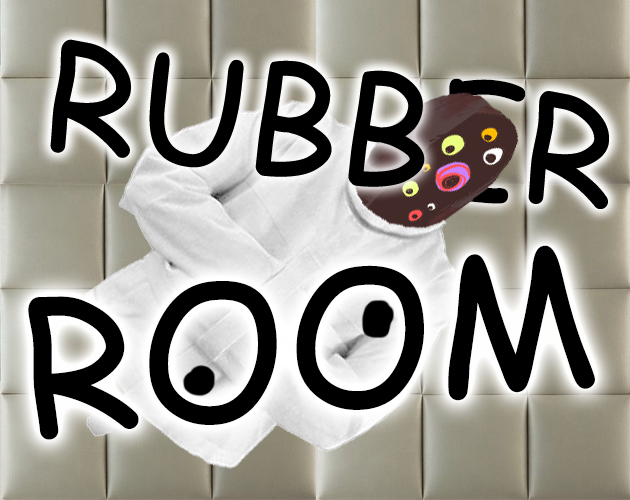
<style>
.page{position:relative;width:630px;height:500px}
.page>*{position:absolute;margin:0}
.t1{font:147.9px "ComicSansMS";color:#000000}
.t2{font:185.4px "ComicSansMS";color:#000000}
</style>
<div class="page">
<p class="t1" style="left:50px;top:39px;width:559px;height:170px;rotate:6deg">RUBBER</p>
<p class="t2" style="left:28px;top:245px;width:567px;height:195px;rotate:-6deg">ROOM</p>
</div>
